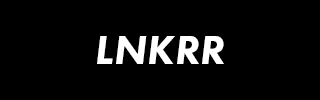
<style>
.page{position:relative;width:320px;height:100px;background:#000000}
.page>*{position:absolute;margin:0}
.t1{font:41.7px "FuturaPT-HeavyObl";color:#ffffff}
</style>
<div class="page">
<p class="t1" style="left:97px;top:36px;width:127px;height:28px">LNKRR</p>
</div>
